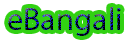
<style>
.page{position:relative;width:128px;height:44px;background:#ffffff}
.page>*{position:absolute;margin:0}
.t1{font:32.5px "MyriadPro-Regular"}
</style>
<div class="page">
<p class="t1" style="left:8px;top:7px;width:113px;height:29px">eBangali</p>
</div>
